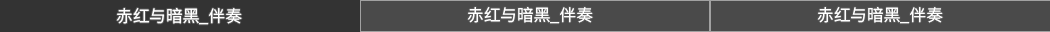
<style>
.page{position:relative;width:1050px;height:32px;background:#4a4a4a}
.page>*{position:absolute;margin:0}
.t1{font:16.7px "SourceHanSansSC-Normal";color:#ffffff}
</style>
<div class="page">
<p class="t1" style="left:116px;top:8px;width:126px;height:17px">赤红与暗黑_伴奏</p>
<p class="t1" style="left:467px;top:7px;width:126px;height:17px">赤红与暗黑_伴奏</p>
<p class="t1" style="left:817px;top:7px;width:126px;height:17px">赤红与暗黑_伴奏</p>
</div>
